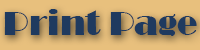
<style>
.page{position:relative;width:200px;height:50px;background:#e8c07d}
.page>*{position:absolute;margin:0}
.t1{font:34px "Broadway";color:#1f3a5f}
</style>
<div class="page">
<p class="t1" style="left:4px;top:9px;width:193px;height:27px">Print Page</p>
</div>
